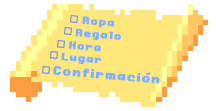
<style>
.page{position:relative;width:216px;height:111px;background:#ffffff}
.page>*{position:absolute;margin:0}
.t1{font:12px "Onesize";color:#7bb0ff;font-weight:bold}
.t2{font:14px "Onesize";color:#7bb0ff;font-weight:bold}
</style>
<div class="page">
<p class="t1" style="left:82px;top:16px;width:33px;height:12px;rotate:5deg">Ropa</p>
<p class="t1" style="left:75px;top:28px;width:46px;height:12px;rotate:5deg">Regalo</p>
<p class="t1" style="left:69px;top:41px;width:32px;height:11px;rotate:5deg">Hora</p>
<p class="t1" style="left:61px;top:52px;width:41px;height:12px;rotate:5deg">Lugar</p>
<p class="t2" style="left:53px;top:66px;width:107px;height:18px;rotate:5deg">Confirmacion</p>
</div>
